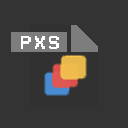
<style>
.page{position:relative;width:128px;height:128px;background:#333333}
.page>*{position:absolute;margin:0}
.t1{font:17px "Cubic_11";letter-spacing:0.2em;color:#ffffff;font-weight:bold}
.t2{font:17px "Cubic_11";letter-spacing:0.28em;color:#ffffff;font-weight:bold}
</style>
<div class="page">
<p class="t1" style="left:21px;top:36px;width:38px;height:13px">PX<span class="t2">S</span></p>
</div>
